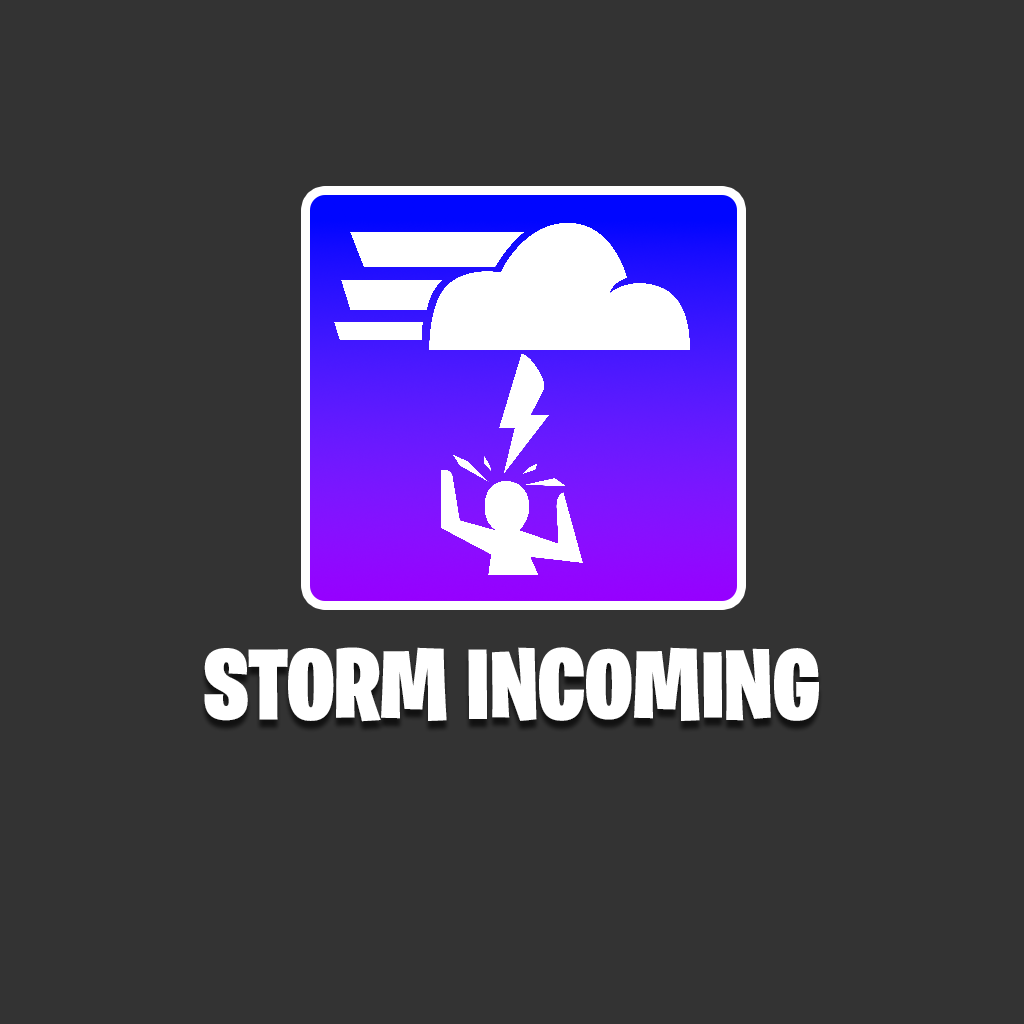
<style>
.page{position:relative;width:1024px;height:1024px;background:#333333}
.page>*{position:absolute;margin:0}
.t1{font:100px "BurbankBigCondensed-Black";color:#ffffff}
</style>
<div class="page">
<p class="t1" style="left:204px;top:647px;width:615px;height:75px">STORM INCOMING</p>
</div>
